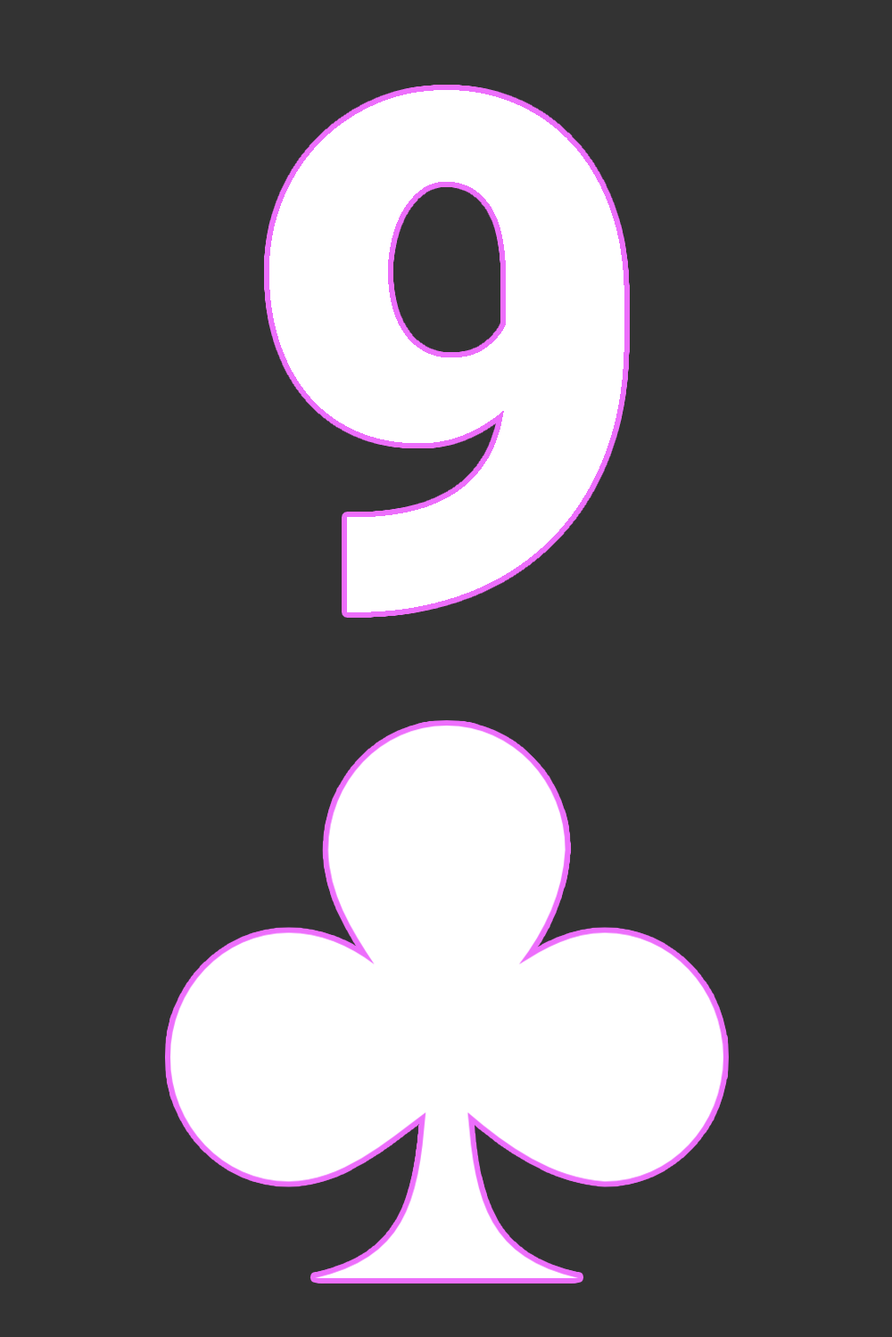
<style>
.page{position:relative;width:892px;height:1337px;background:#333333}
.page>*{position:absolute;margin:0}
.t1{font:713.3px "Roboto-Black";letter-spacing:0.02em;color:#ffffff}
</style>
<div class="page">
<p class="t1" style="left:269px;top:90px;width:355px;height:523px">9</p>
</div>
